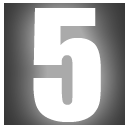
<style>
.page{position:relative;width:128px;height:128px;background:#ffffff}
.page>*{position:absolute;margin:0}
.t1{font:142.1px "Impact";color:#ffffff}
</style>
<div class="page">
<p class="t1" style="left:33px;top:8px;width:68px;height:114px">5</p>
</div>
